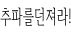
<style>
.page{position:relative;width:71px;height:40px;background:#ffffff}
.page>*{position:absolute;margin:0}
.t1{font:19.9px "HCRBatang";letter-spacing:0.005em;color:#000000;scale:0.59 1}
</style>
<div class="page">
<p class="t1" style="left:0px;top:7px;width:71px;height:20px">추파를던져라!</p>
</div>
